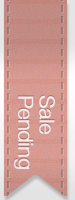
<style>
.page{position:relative;width:75px;height:200px}
.page>*{position:absolute;margin:0}
.t1{font:20.8px/21.4px "HelveticaNeue-Light";letter-spacing:-0.02em;font-weight:bold}
.t2{font:20.8px/21.4px "HelveticaNeue-Light";letter-spacing:-0.02em;color:#f4eae9;font-weight:bold}
</style>
<div class="page">
<p class="t1" style="left:13px;top:94px;width:43px;height:75px;rotate:90deg">Sale<br>Pending</p>
<p class="t2" style="left:13px;top:95px;width:43px;height:75px;rotate:90deg">Sale<br>Pending</p>
</div>
